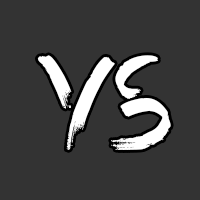
<style>
.page{position:relative;width:200px;height:200px;background:#333333}
.page>*{position:absolute;margin:0}
.t1{font:134.7px "ChineseTakeaway";color:#ffffff;scale:1.06 1}
</style>
<div class="page">
<p class="t1" style="left:37px;top:55px;width:134px;height:95px">vs</p>
</div>
